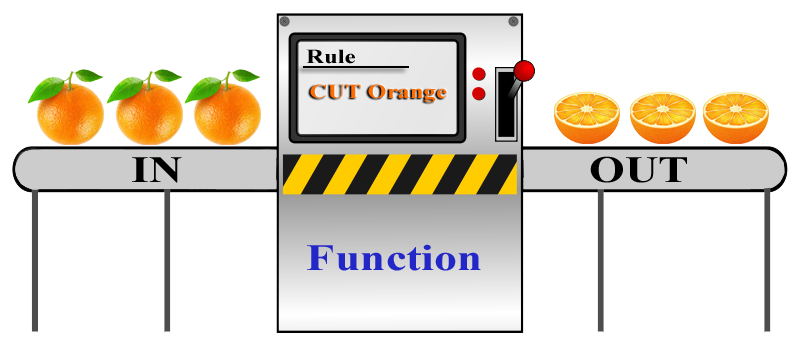
<style>
.page{position:relative;width:800px;height:340px;background:#ffffff}
.page>*{position:absolute;margin:0}
.t1{font:20px "TimesNewRomanPS-BoldMT";color:#000000;scale:1.23 1}
.t2{font:20px "TimesNewRomanPS-BoldMT";color:#fb6e06;scale:1.23 1}
.t3{font:37.3px "TimesNewRomanPS-BoldMT";color:#000000;scale:1.23 1}
.t4{font:37.3px "TimesNewRomanPS-BoldMT";color:#2327c7;scale:1.23 1}
</style>
<div class="page">
<p class="t1" style="left:306px;top:49px;width:49px;height:15px">Rule</p>
<p class="t2" style="left:310px;top:84px;width:137px;height:19px">CUT Orange</p>
<p class="t3" style="left:132px;top:157px;width:50px;height:26px">IN</p>
<p class="t3" style="left:590px;top:156px;width:97px;height:27px">OUT</p>
<p class="t4" style="left:307px;top:244px;width:174px;height:27px">Function</p>
</div>
